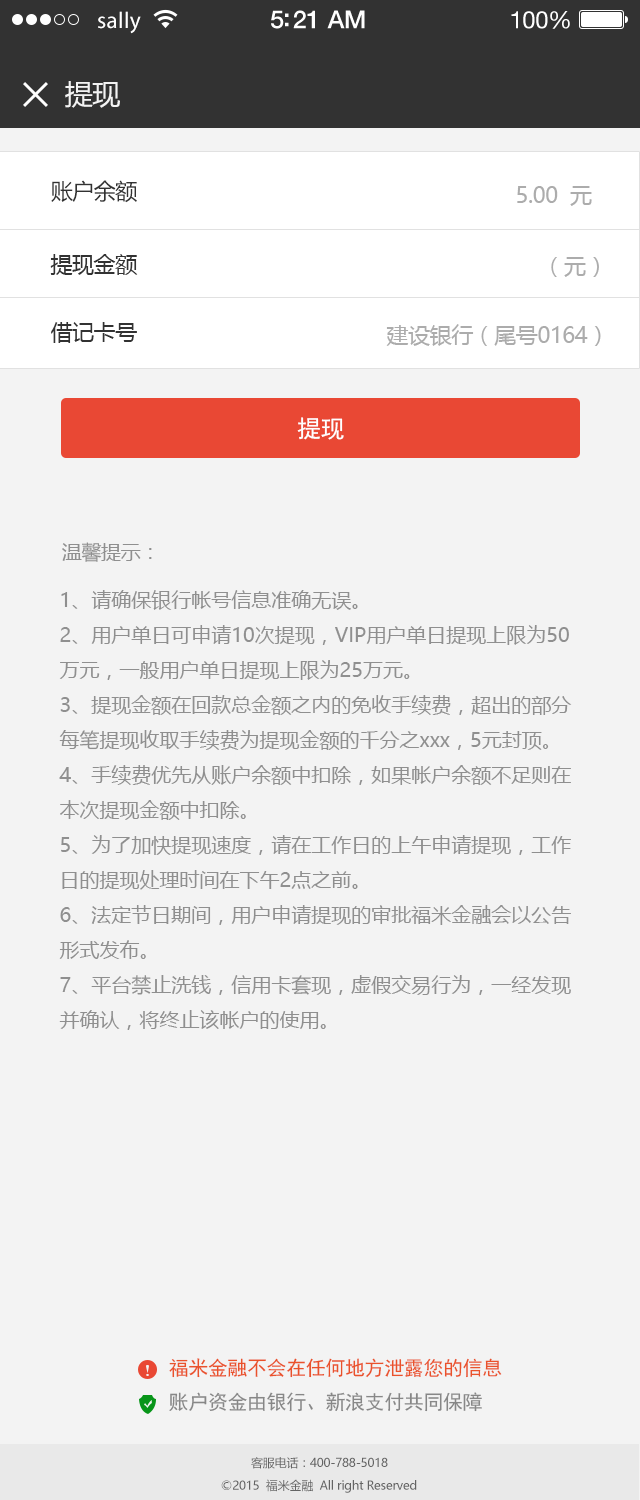
<style>
.page{position:relative;width:640px;height:1500px;background:#f3f3f3}
.page>*{position:absolute;margin:0}
.t1{font:23px "MyriadPro-Regular";letter-spacing:0.02em;color:#ffffff}
.t2{font:25px "HelveticaNeue-Medium";letter-spacing:-0.02em;color:#ffffff}
.t3{font:24px "HelveticaNeue";letter-spacing:-0.02em;color:#ffffff}
.t4{font:28px "MicrosoftYaHei";letter-spacing:-0.02em;color:#f3f3f3}
.t5{font:22px "MicrosoftYaHei";letter-spacing:-0.02em;color:#323232}
.t6{font:22px "MicrosoftYaHei";letter-spacing:-0.02em;color:#acacac}
.t7{font:24px "SimHei";letter-spacing:-0.02em;color:#ffffff}
.t8{font:20px "MicrosoftYaHei";letter-spacing:-0.02em;color:#8f8f8f}
.t9{font:20px "MicrosoftYaHei";color:#8f8f8f}
.t10{font:20px "SimHei";letter-spacing:-0.02em;color:#ea522b}
.t11{font:20px "SimHei";letter-spacing:-0.02em;color:#878787}
.t12{font:12px "MicrosoftYaHei";letter-spacing:-0.02em;color:#646464}
</style>
<div class="page">
<p class="t1" style="left:98px;top:11px;width:43px;height:23px">sally</p>
<p class="t2" style="left:271px;top:10px;width:94px;height:19px">5:21 AM</p>
<p class="t3" style="left:511px;top:11px;width:59px;height:18px">100%</p>
<p class="t4" style="left:65px;top:81px;width:55px;height:27px">提现</p>
<p class="t5" style="left:51px;top:180px;width:86px;height:23px">账户余额</p>
<p class="t6" style="left:517px;top:186px;width:75px;height:20px">5.00  元</p>
<p class="t5" style="left:50px;top:254px;width:88px;height:21px">提现金额</p>
<p class="t6" style="left:551px;top:257px;width:48px;height:20px">（元）</p>
<p class="t5" style="left:51px;top:322px;width:86px;height:21px">借记卡号</p>
<p class="t6" style="left:386px;top:324px;width:215px;height:22px">建设银行（尾号0164）</p>
<p class="t7" style="left:297px;top:417px;width:47px;height:23px">提现</p>
<p class="t8" style="left:62px;top:542px;width:90px;height:20px">温馨提示：</p>
<p class="t9" style="left:59px;top:590px;width:513px;height:440px">1、请确保银行帐号信息准确无误。<br>2、用户单日可申请10次提现，VIP用户单日提现上限为50万元，一般用户单日提现上限为25万元。<br>3、提现金额在回款总金额之内的免收手续费，超出的部分每笔提现收取手续费为提现金额的千分之xxx，5元封顶。<br>4、手续费优先从账户余额中扣除，如果帐户余额不足则在本次提现金额中扣除。<br>5、为了加快提现速度，请在工作日的上午申请提现，工作日的提现处理时间在下午2点之前。<br>6、法定节日期间，用户申请提现的审批福米金融会以公告形式发布。<br>7、平台禁止洗钱，信用卡套现，虚假交易行为，一经发现并确认，将终止该帐户的使用。</p>
<p class="t10" style="left:169px;top:1358px;width:333px;height:20px">福米金融不会在任何地方泄露您的信息</p>
<p class="t11" style="left:169px;top:1392px;width:313px;height:20px">账户资金由银行、新浪支付共同保障</p>
<p class="t12" style="left:251px;top:1457px;width:137px;height:12px">客服电话：400-788-5018</p>
<p class="t12" style="left:221px;top:1479px;width:196px;height:14px">©2015  福米金融  All right Reserved</p>
</div>
